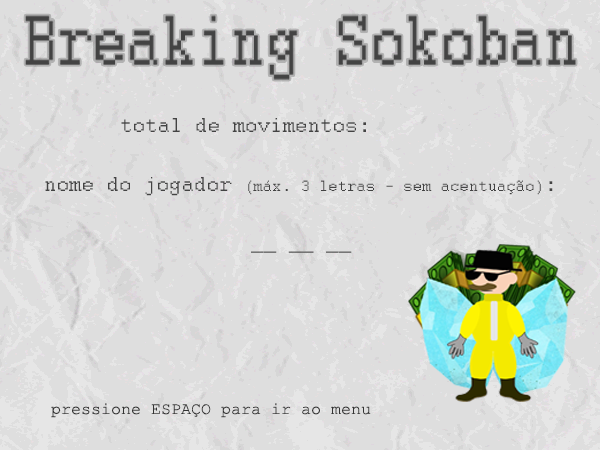
<style>
.page{position:relative;width:600px;height:450px;background:#dedede}
.page>*{position:absolute;margin:0}
.t1{font:22.2px "Courier";color:#434343}
.t2{font:16.7px "Courier";color:#434343}
.t3{font:22.2px "Courier"}
.t4{font:16.7px "CourierNewPSMT";color:#333333}
</style>
<div class="page">
<p class="t1" style="left:121px;top:118px;width:245px;height:14px">total de movimentos:</p>
<p class="t2" style="left:45px;top:177px;width:508px;height:19px"><span class="t1">nome do jogador </span>(máx. 3 letras - sem acentuação)<span class="t1">:</span></p>
<p class="t3" style="left:251px;top:251px;width:101px;height:2px">__ __ __</p>
<p class="t4" style="left:51px;top:403px;width:320px;height:15px">pressione ESPAÇO para ir ao menu</p>
</div>
